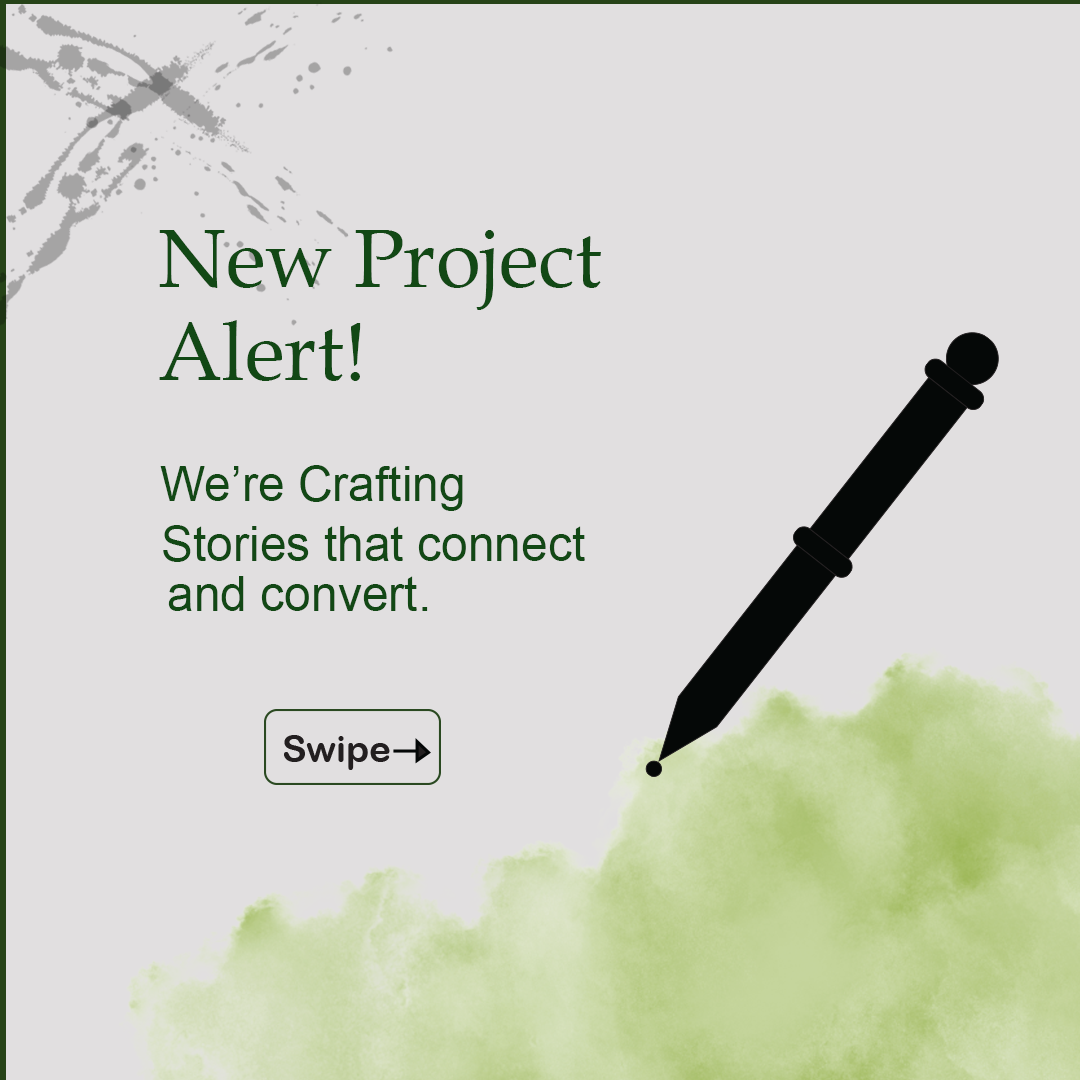
<style>
.page{position:relative;width:1080px;height:1080px;background:#e1dfe0}
.page>*{position:absolute;margin:0}
.t1{font:81.9px "BookAntiqua";color:#124815}
.t2{font:48px "ArialMT";color:#124815}
</style>
<div class="page">
<p class="t1" style="left:159px;top:230px;width:442px;height:80px">New Project</p>
<p class="t1" style="left:159px;top:320px;width:202px;height:61px">Alert!</p>
<p class="t2" style="left:160px;top:465px;width:303px;height:46px">We’re Crafting</p>
<p class="t2" style="left:163px;top:525px;width:422px;height:37px">Stories that connect</p>
<p class="t2" style="left:168px;top:576px;width:260px;height:35px">and convert.</p>
</div>
